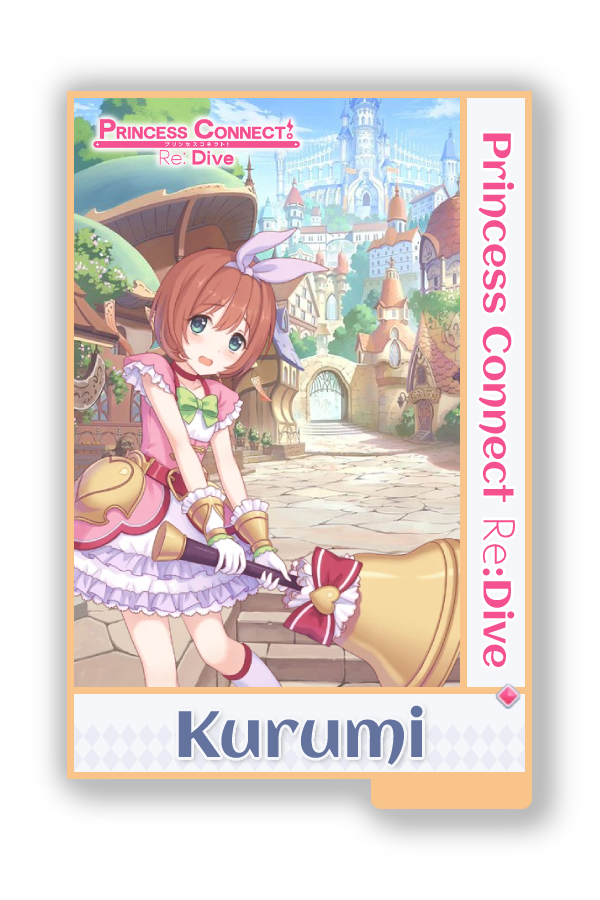
<style>
.page{position:relative;width:600px;height:900px;background:#ffffff}
.page>*{position:absolute;margin:0}
.t1{font:39px "Aclonica-Regular";color:#f55191}
.t2{font:39px "AaarghNormal";color:#f55191}
.t3{font:65px "Aclonica-Regular";color:#64739d}
</style>
<div class="page">
<p class="t1" style="left:478px;top:133px;width:38px;height:534px;rotate:90deg">Princess Connect <span class="t2">Re</span>:Dive</p>
<p class="t3" style="left:178px;top:705px;width:245px;height:60px">Kurumi</p>
</div>
